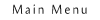
<style>
.page{position:relative;width:100px;height:20px;background:#ffffff}
.page>*{position:absolute;margin:0}
.t1{font:13.2px "Amira-Roman";letter-spacing:0.18em;color:#191919;scale:0.91 1}
</style>
<div class="page">
<p class="t1" style="left:12px;top:4px;width:75px;height:10px">Main Menu</p>
</div>
